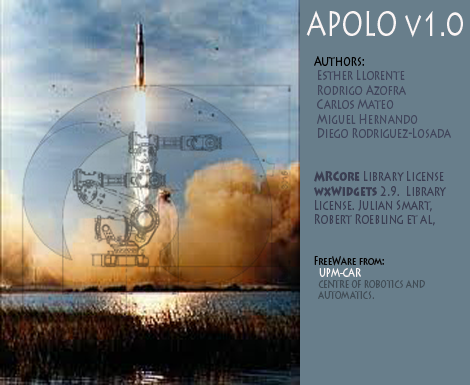
<style>
.page{position:relative;width:470px;height:385px;background:#687e8b}
.page>*{position:absolute;margin:0}
.t1{font:34.8px "LithosPro-Regular";color:#fbf5f5;scale:0.72 1}
.t2{font:13.9px "LithosPro-Regular";color:#41465c;scale:0.72 1}
.t3{font:13.9px "LithosPro-Regular";color:#010101;scale:0.72 1}
.t4{font:13.9px "LithosPro-Black";color:#3b3e52;scale:0.72 1}
.t5{font:13.9px "LithosPro-Regular";color:#3b3e52;scale:0.72 1}
.t6{font:11.6px "LithosPro-Regular";color:#060505;scale:0.72 1}
.t7{font:11.6px "LithosPro-Regular";color:#fbf5f5;scale:0.72 1}
.t8{font:10.4px "LithosPro-Regular";color:#414d56;scale:0.72 1}
</style>
<div class="page">
<p class="t1" style="left:306px;top:10px;width:157px;height:28px">APOLO v1.0</p>
<p class="t2" style="left:314px;top:56px;width:137px;height:243px"><span class="t3">Authors:<br> </span>Esther Llorente<br> Rodrigo Azofra<br> Carlos Mateo<br> Miguel Hernando<br> Diego Rodriguez-Losada<br><br><br><span class="t4">MRCore</span><span class="t5"> Library License<br></span><span class="t4">wxWidgets</span><span class="t5"> 2.9.  Library <br>License. Julian Smart,<br>Robert Roebling et al, <br><br><br></span><span class="t6">FreeWare from:<br></span><span class="t7">  UPM-CAR<br></span><span class="t8">  CENTRE OF ROBOTICS AND<br>  AUTOMATICS.</span></p>
</div>
